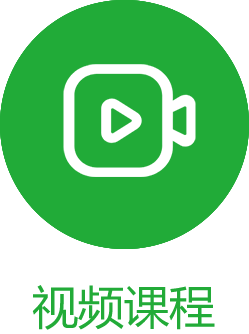
<style>
.page{position:relative;width:249px;height:334px;background:#21ab38}
.page>*{position:absolute;margin:0}
.t1{font:45.7px "MicrosoftYaHei";color:#22ac38}
</style>
<div class="page">
<p class="t1" style="left:32px;top:285px;width:183px;height:45px">视频课程</p>
</div>
